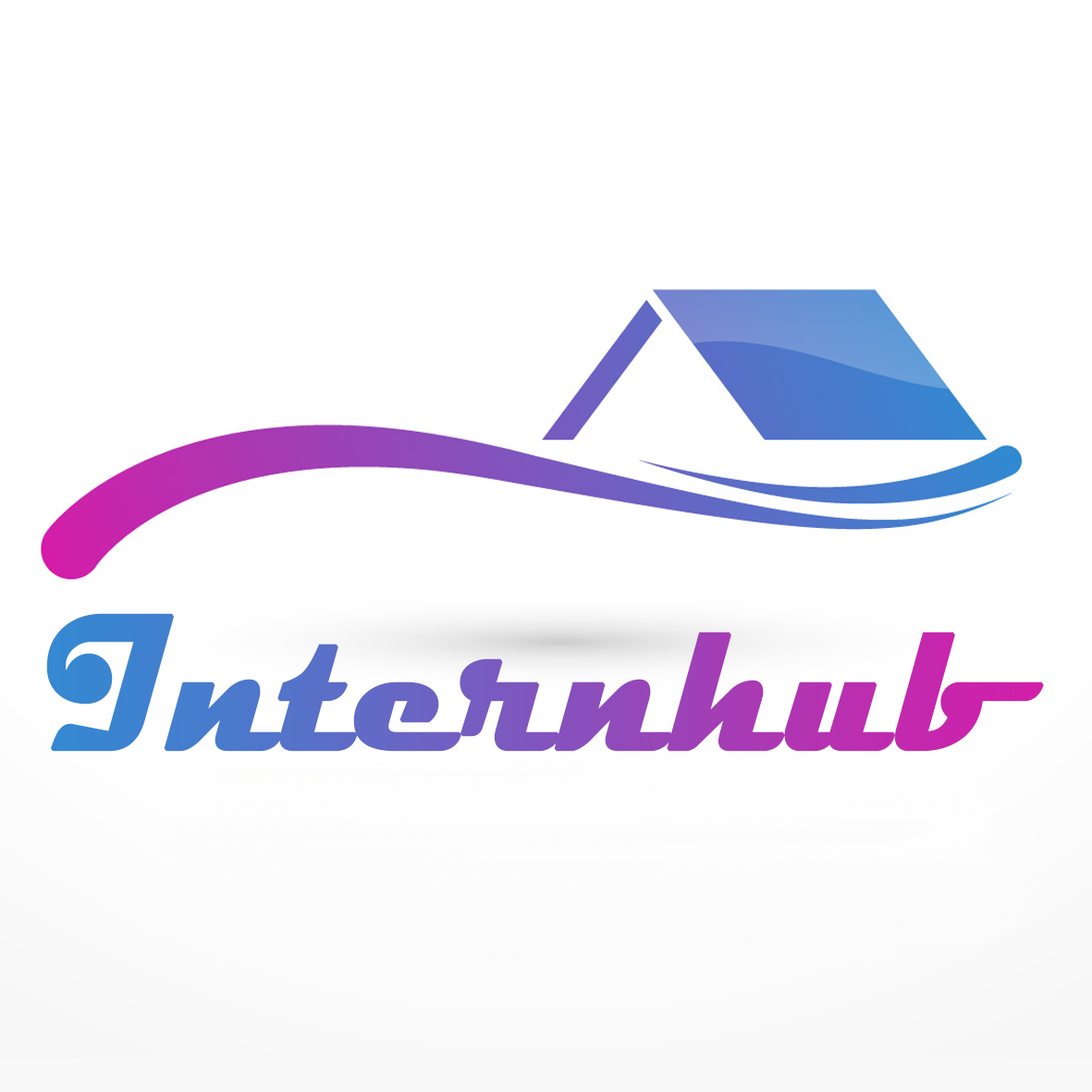
<style>
.page{position:relative;width:1092px;height:1092px;background:#ffffff}
.page>*{position:absolute;margin:0}
.t1{font:194px "Magneto-Bold";font-weight:bold;scale:0.84 1}
</style>
<div class="page">
<p class="t1" style="left:46px;top:613px;width:998px;height:139px">Internhub</p>
</div>
